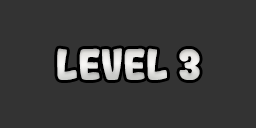
<style>
.page{position:relative;width:256px;height:128px;background:#333333}
.page>*{position:absolute;margin:0}
.t1{font:41.7px "Gogono-Cocoa-Mochi";color:#dedddb}
</style>
<div class="page">
<p class="t1" style="left:57px;top:48px;width:143px;height:32px">LEVEL 3</p>
</div>
